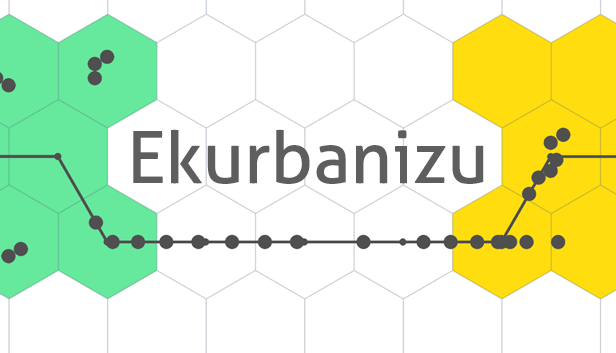
<style>
.page{position:relative;width:616px;height:353px;background:#ffffff}
.page>*{position:absolute;margin:0}
.t1{font:72px "Aller";color:#5e5e5e}
</style>
<div class="page">
<p class="t1" style="left:133px;top:129px;width:351px;height:55px">Ekurbanizu</p>
</div>
